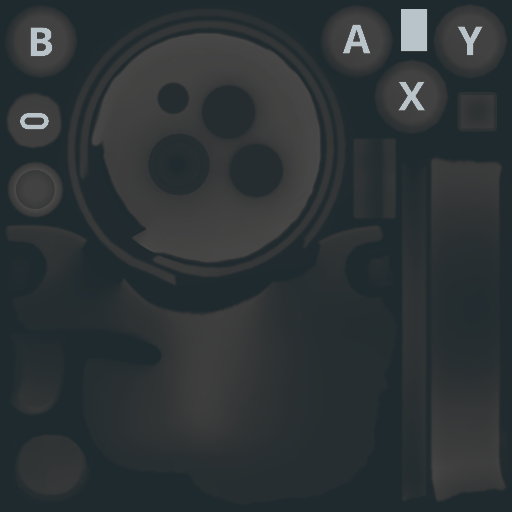
<style>
.page{position:relative;width:512px;height:512px}
.page>*{position:absolute;margin:0}
.t1{font:39.9px "OpenSans-Bold";color:#b8c3ca;font-weight:bold}
</style>
<div class="page">
<p class="t1" style="left:30px;top:27px;width:23px;height:30px">B</p>
<p class="t1" style="left:342px;top:24px;width:29px;height:30px">A</p>
<p class="t1" style="left:457px;top:26px;width:26px;height:30px">Y</p>
<p class="t1" style="left:398px;top:81px;width:28px;height:30px">X</p>
</div>
